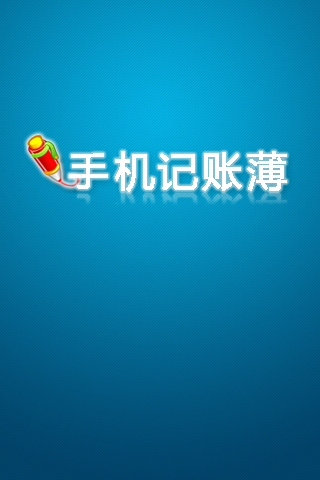
<style>
.page{position:relative;width:320px;height:480px}
.page>*{position:absolute;margin:0}
.t1{font:40.2px "MicrosoftYaHei";letter-spacing:0.08em;color:#ffffff;font-weight:bold}
</style>
<div class="page">
<p class="t1" style="left:69px;top:151px;width:218px;height:41px">手机记账薄</p>
</div>
